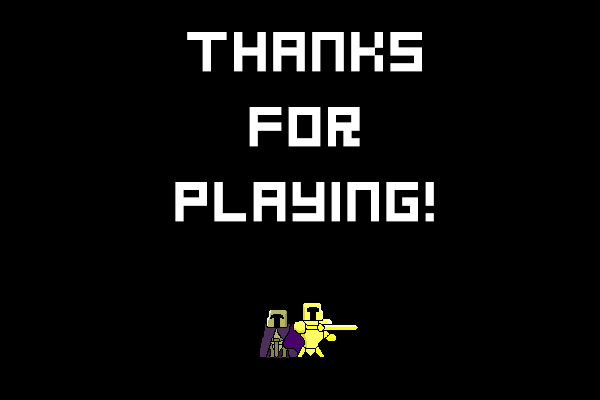
<style>
.page{position:relative;width:600px;height:400px;background:#000000}
.page>*{position:absolute;margin:0}
.t1{font:62.5px "GoodbyeDespair";color:#ffffff}
</style>
<div class="page">
<p class="t1" style="left:175px;top:32px;width:259px;height:190px;text-align:center">thanks<br>for<br>playing!</p>
</div>
